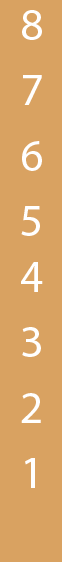
<style>
.page{position:relative;width:62px;height:562px;background:#d9a261}
.page>*{position:absolute;margin:0}
.t1{font:46px "MyriadPro-Regular";color:#ffffff}
</style>
<div class="page">
<p class="t1" style="left:21px;top:10px;width:22px;height:478px">8  7  6  5 4  3  2  1</p>
</div>
